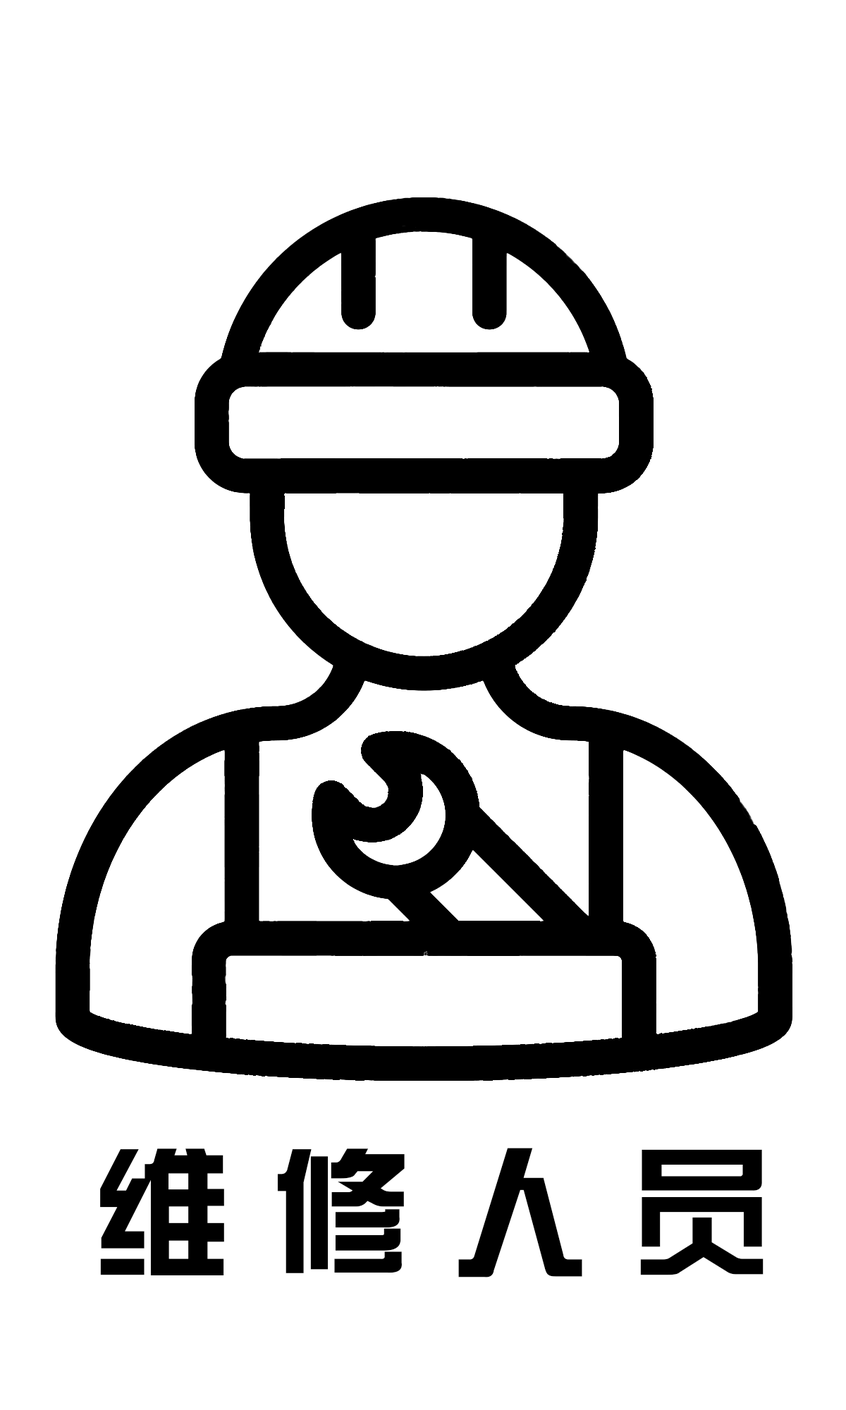
<style>
.page{position:relative;width:846px;height:1410px;background:#ffffff}
.page>*{position:absolute;margin:0}
.t1{font:141px "FZZYJW--GB1-0";color:#000000}
</style>
<div class="page">
<p class="t1" style="left:100px;top:1148px;width:663px;height:129px">维 修 人 员</p>
</div>
